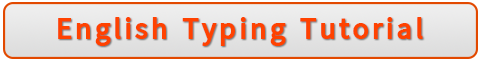
<style>
.page{position:relative;width:480px;height:60px}
.page>*{position:absolute;margin:0}
.t1{font:30.7px "Pyidaungsu-Bold";letter-spacing:0.1em;color:#ff4200}
</style>
<div class="page">
<p class="t1" style="left:58px;top:17px;width:365px;height:29px">English Typing Tutorial</p>
</div>
